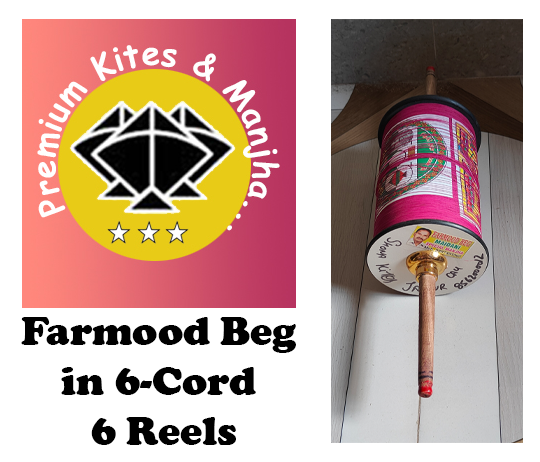
<style>
.page{position:relative;width:540px;height:462px;background:#ffffff}
.page>*{position:absolute;margin:0}
.t1{font:41.7px "CooperBlack";color:#000000}
</style>
<div class="page">
<p class="t1" style="left:21px;top:317px;width:275px;height:128px;text-align:center">Farmood Beg<br>in 6-Cord<br> 6 Reels</p>
</div>
